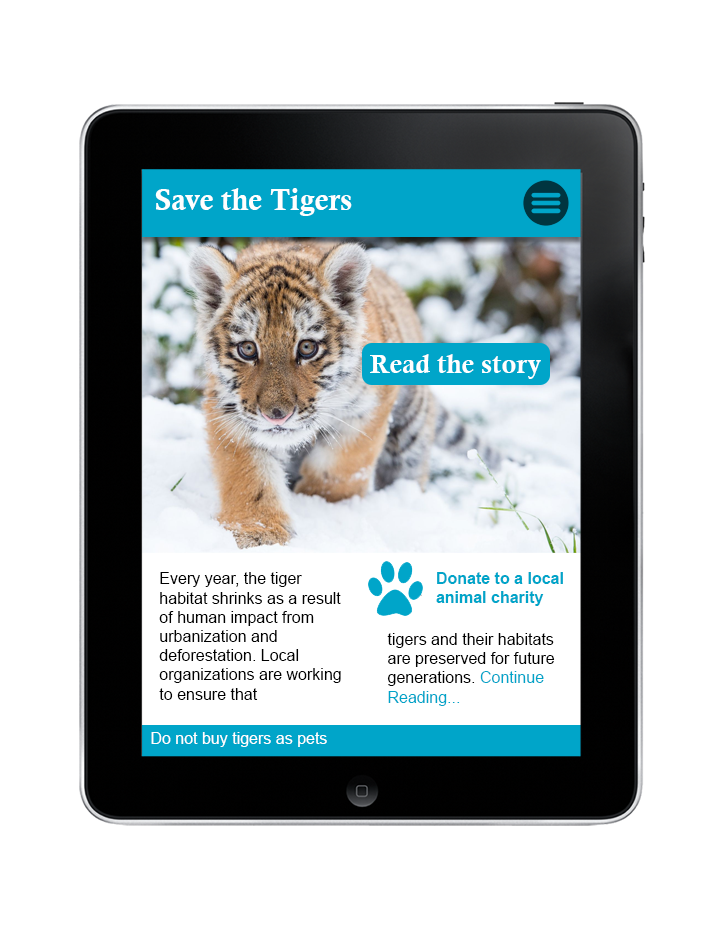
<style>
.page{position:relative;width:724px;height:926px;background:#ffffff}
.page>*{position:absolute;margin:0}
.t1{font:30px "CalisMTBol";color:#ffffff}
.t2{font:27px "CalisMTBol";color:#ffffff}
.t3{font:16px "ArialMT";color:#000000}
.t4{font:16px "Arial-BoldMT";color:#00a5c9}
.t5{font:16px "ArialMT";color:#00a5c9}
.t6{font:16px "ArialMT";color:#ffffff}
</style>
<div class="page">
<p class="t1" style="left:155px;top:188px;width:197px;height:28px">Save the Tigers</p>
<p class="t2" style="left:370px;top:354px;width:171px;height:25px">Read the story</p>
<p class="t3" style="left:159px;top:572px;width:182px;height:128px">Every year, the tiger <br>habitat shrinks as a result of human impact from <br>urbanization and<br>deforestation. Local <br>organizations are working to ensure that</p>
<p class="t4" style="left:436px;top:572px;width:127px;height:34px">Donate to a local animal charity</p>
<p class="t3" style="left:387px;top:633px;width:168px;height:73px">tigers and their habitats are preserved for future generations.<span class="t5"> Continue Reading...</span></p>
<p class="t6" style="left:151px;top:732px;width:176px;height:15px">Do not buy tigers as pets</p>
</div>
